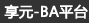
<style>
.page{position:relative;width:89px;height:23px;background:#333333}
.page>*{position:absolute;margin:0}
.t1{font:14px "MicrosoftYaHei";color:#ffffff;font-weight:bold}
</style>
<div class="page">
<p class="t1" style="left:4px;top:4px;width:84px;height:15px">享元-BA平台</p>
</div>
